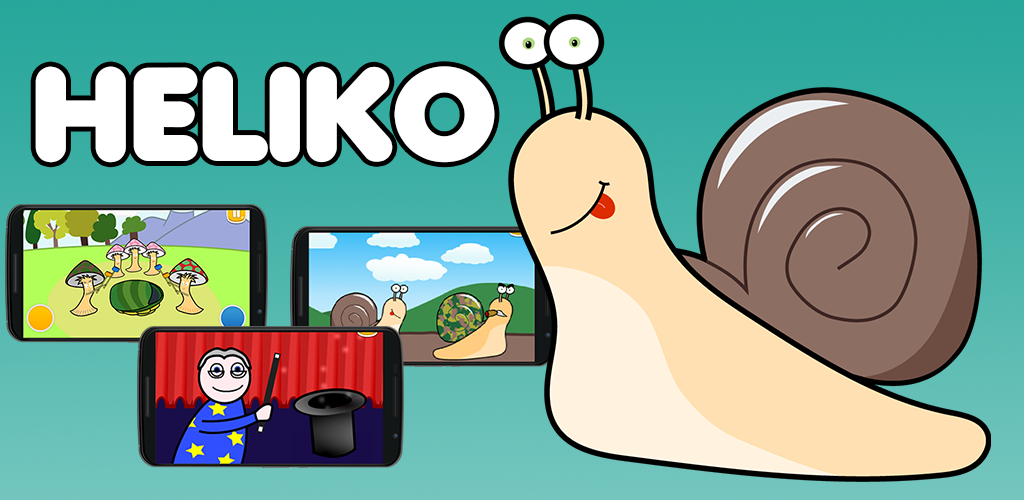
<style>
.page{position:relative;width:1024px;height:500px}
.page>*{position:absolute;margin:0}
.t1{font:129.9px "Debussy";color:#ffffff}
</style>
<div class="page">
<p class="t1" style="left:35px;top:66px;width:460px;height:97px">HELIKO</p>
</div>
